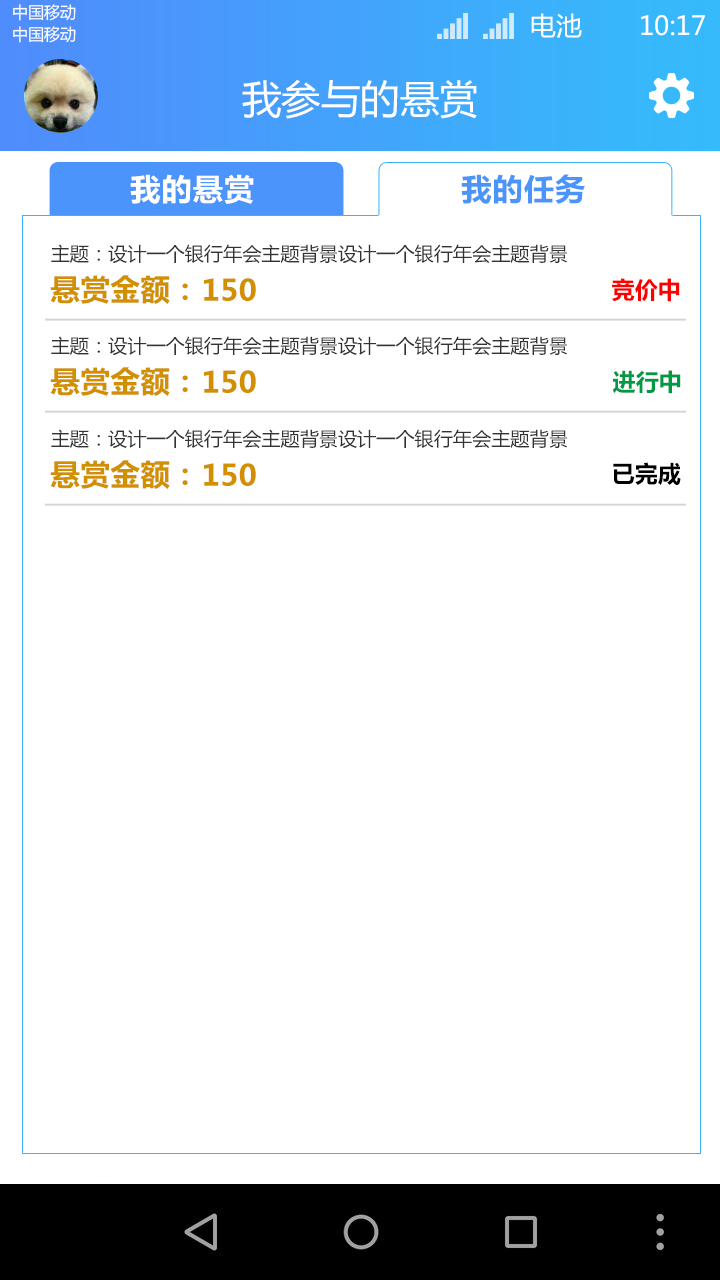
<style>
.page{position:relative;width:720px;height:1280px;background:#ffffff}
.page>*{position:absolute;margin:0}
.t1{font:16.2px "MicrosoftYaHei";color:#ffffff;text-transform:uppercase}
.t2{font:26.1px "MicrosoftYaHei";color:#ffffff;text-transform:uppercase}
.t3{font:39.5px "MicrosoftYaHei";color:#ffffff;text-transform:uppercase}
.t4{font:30.3px "MicrosoftYaHei-Bold";letter-spacing:0.05em;color:#ffffff}
.t5{font:30.3px "MicrosoftYaHei-Bold";letter-spacing:0.05em;color:#4b94fc}
.t6{font:19px "MicrosoftYaHei";color:#333333}
.t7{font:29.5px "MicrosoftYaHei-Bold";color:#d28f00}
.t8{font:23.3px "MicrosoftYaHei-Bold";color:#ff0000}
.t9{font:23.3px "MicrosoftYaHei-Bold";color:#009944}
.t10{font:23.3px "MicrosoftYaHei-Bold";color:#000000}
</style>
<div class="page">
<p class="t1" style="left:13px;top:4px;width:63px;height:17px">中国移动</p>
<p class="t2" style="left:531px;top:13px;width:51px;height:25px">电池</p>
<p class="t2" style="left:641px;top:15px;width:64px;height:21px">10:17</p>
<p class="t1" style="left:13px;top:26px;width:63px;height:17px">中国移动</p>
<p class="t3" style="left:242px;top:79px;width:235px;height:40px">我参与的悬赏</p>
<p class="t4" style="left:130px;top:174px;width:124px;height:30px">我的悬赏</p>
<p class="t5" style="left:461px;top:174px;width:124px;height:30px">我的任务</p>
<p class="t6" style="left:51px;top:244px;width:516px;height:20px">主题：设计一个银行年会主题背景设计一个银行年会主题背景</p>
<p class="t7" style="left:50px;top:275px;width:138px;height:29px">悬赏金额：</p>
<p class="t7" style="left:204px;top:278px;width:52px;height:23px">150</p>
<p class="t8" style="left:612px;top:278px;width:68px;height:24px">竞价中</p>
<p class="t6" style="left:51px;top:336px;width:516px;height:20px">主题：设计一个银行年会主题背景设计一个银行年会主题背景</p>
<p class="t7" style="left:50px;top:367px;width:138px;height:29px">悬赏金额：</p>
<p class="t7" style="left:204px;top:370px;width:52px;height:23px">150</p>
<p class="t9" style="left:613px;top:370px;width:68px;height:24px">进行中</p>
<p class="t6" style="left:51px;top:429px;width:516px;height:20px">主题：设计一个银行年会主题背景设计一个银行年会主题背景</p>
<p class="t7" style="left:50px;top:460px;width:138px;height:29px">悬赏金额：</p>
<p class="t10" style="left:613px;top:462px;width:68px;height:23px">已完成</p>
<p class="t7" style="left:204px;top:463px;width:52px;height:23px">150</p>
</div>
